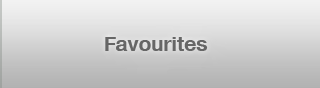
<style>
.page{position:relative;width:320px;height:88px}
.page>*{position:absolute;margin:0}
.t1{font:20px "Heavenetica7BoldSH";letter-spacing:0.005em;color:#666666}
</style>
<div class="page">
<p class="t1" style="left:105px;top:37px;width:103px;height:14px">Favourites</p>
</div>
